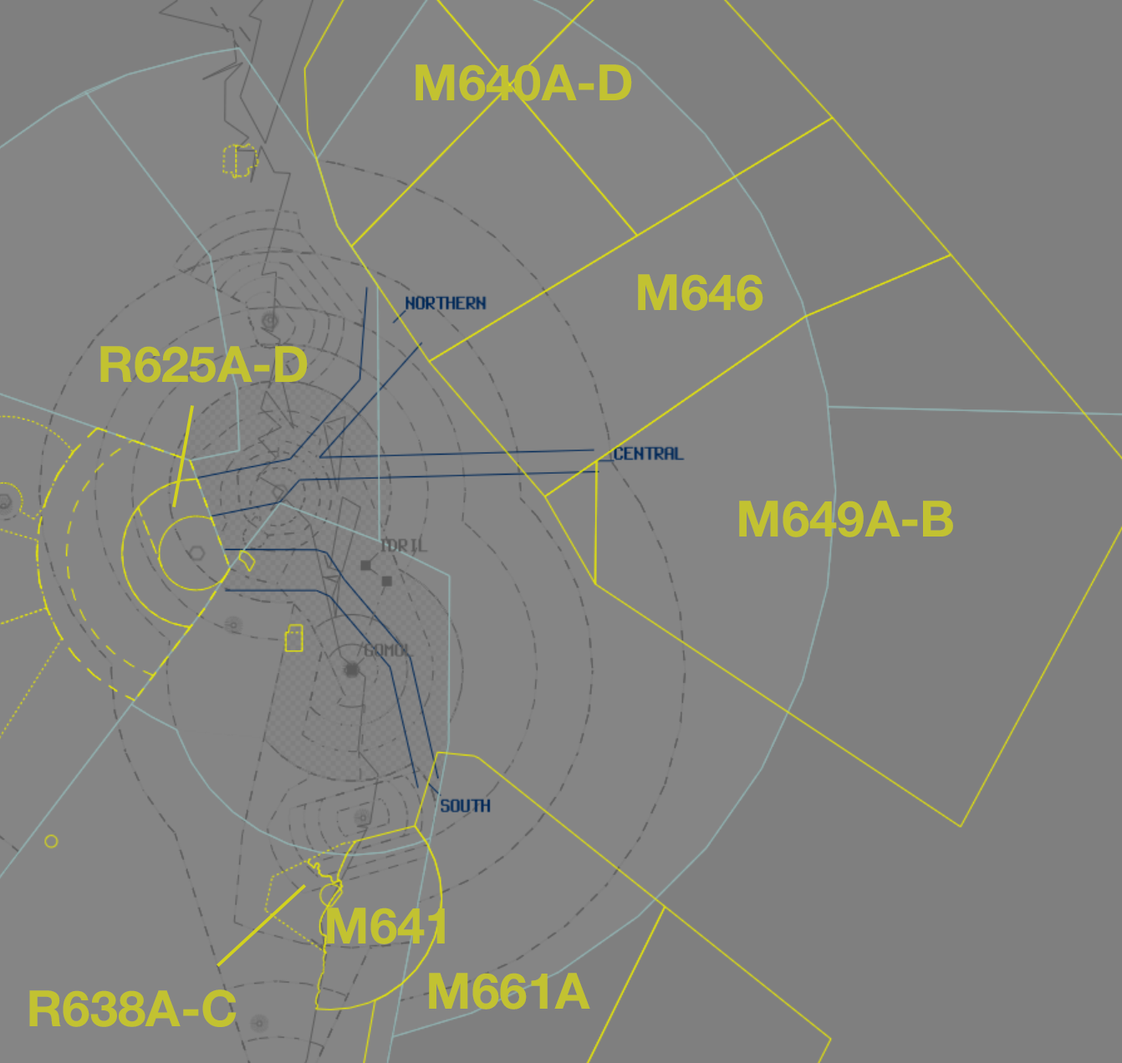
<style>
.page{position:relative;width:1122px;height:1063px;background:#858585}
.page>*{position:absolute;margin:0}
.t1{font:50.1px "HelveticaNeue-Bold";color:#c2c231}
</style>
<div class="page">
<p class="t1" style="left:415px;top:64px;width:217px;height:37px">M640A-D</p>
<p class="t1" style="left:638px;top:274px;width:125px;height:37px">M646</p>
<p class="t1" style="left:100px;top:346px;width:208px;height:37px">R625A-D</p>
<p class="t1" style="left:739px;top:501px;width:214px;height:36px">M649A-B</p>
<p class="t1" style="left:327px;top:908px;width:118px;height:36px">M641</p>
<p class="t1" style="left:429px;top:973px;width:161px;height:37px">M661A</p>
<p class="t1" style="left:29px;top:990px;width:208px;height:37px">R638A-C</p>
</div>
